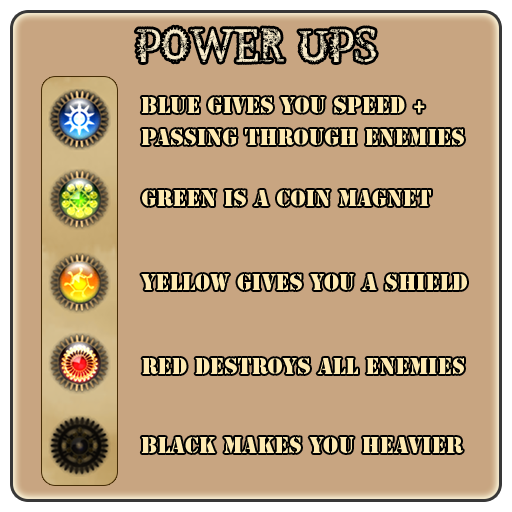
<style>
.page{position:relative;width:512px;height:512px;background:#c8a581}
.page>*{position:absolute;margin:0}
.t1{font:50px "SteampunkbyMartavanEck";letter-spacing:0.01em;color:#f9eccb}
.t2{font:21px/32px "StencilStd";letter-spacing:0.01em;color:#feeab2}
.t3{font:21px "StencilStd";letter-spacing:0.01em;color:#feeab2}
</style>
<div class="page">
<p class="t1" style="left:136px;top:27px;width:240px;height:35px">POWER UPS</p>
<p class="t2" style="left:141px;top:97px;width:323px;height:48px">blue gives you speed + <br>passing through enemies</p>
<p class="t3" style="left:142px;top:190px;width:289px;height:16px">green is a coin magnet</p>
<p class="t3" style="left:141px;top:274px;width:326px;height:16px">yellow gives you a shield</p>
<p class="t3" style="left:142px;top:358px;width:322px;height:16px">red destroys all enemies</p>
<p class="t3" style="left:141px;top:437px;width:322px;height:16px">BLACK MAKES YOU HEAVIER</p>
</div>
